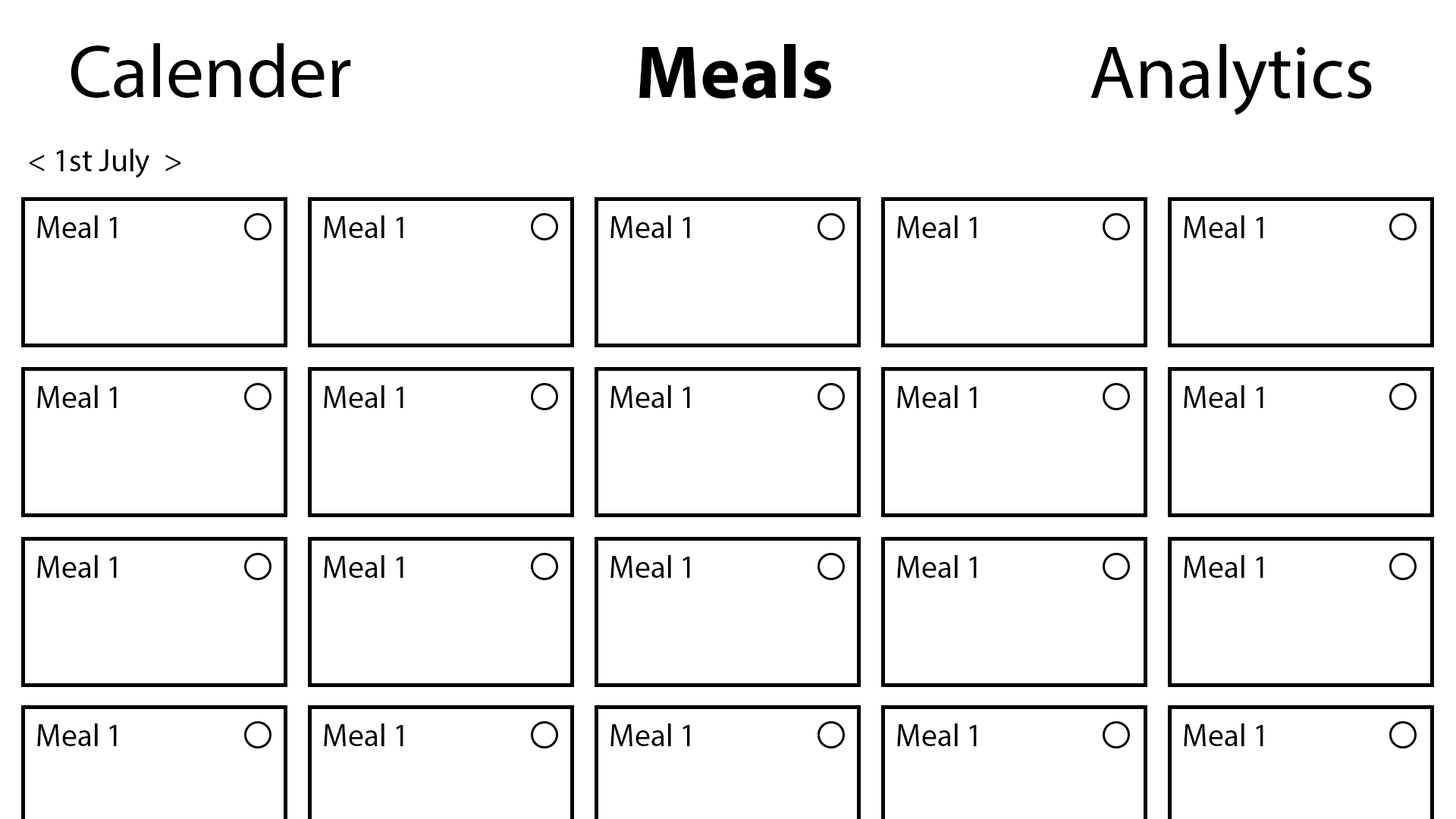
<style>
.page{position:relative;width:1456px;height:819px;background:#ffffff}
.page>*{position:absolute;margin:0}
.t1{font:75.8px "MyriadPro-Regular";color:#000000}
.t2{font:75.8px "MyriadPro-Bold";color:#000000}
.t3{font:31.6px "MyriadPro-Regular";color:#000000}
</style>
<div class="page">
<p class="t1" style="left:71px;top:43px;width:280px;height:55px">Calender</p>
<p class="t2" style="left:639px;top:44px;width:192px;height:55px">Meals</p>
<p class="t1" style="left:1090px;top:44px;width:282px;height:71px">Analytics</p>
<p class="t3" style="left:30px;top:149px;width:150px;height:29px">&lt; 1st July  &gt;</p>
<p class="t3" style="left:37px;top:215px;width:80px;height:23px">Meal 1</p>
<p class="t3" style="left:324px;top:215px;width:79px;height:23px">Meal 1</p>
<p class="t3" style="left:610px;top:215px;width:80px;height:23px">Meal 1</p>
<p class="t3" style="left:897px;top:215px;width:80px;height:23px">Meal 1</p>
<p class="t3" style="left:1184px;top:215px;width:79px;height:23px">Meal 1</p>
<p class="t3" style="left:37px;top:385px;width:80px;height:23px">Meal 1</p>
<p class="t3" style="left:324px;top:385px;width:79px;height:23px">Meal 1</p>
<p class="t3" style="left:610px;top:385px;width:80px;height:23px">Meal 1</p>
<p class="t3" style="left:897px;top:385px;width:80px;height:23px">Meal 1</p>
<p class="t3" style="left:1184px;top:385px;width:79px;height:23px">Meal 1</p>
<p class="t3" style="left:37px;top:555px;width:80px;height:23px">Meal 1</p>
<p class="t3" style="left:324px;top:555px;width:79px;height:23px">Meal 1</p>
<p class="t3" style="left:610px;top:555px;width:80px;height:23px">Meal 1</p>
<p class="t3" style="left:897px;top:555px;width:80px;height:23px">Meal 1</p>
<p class="t3" style="left:1184px;top:555px;width:79px;height:23px">Meal 1</p>
<p class="t3" style="left:37px;top:723px;width:80px;height:23px">Meal 1</p>
<p class="t3" style="left:324px;top:723px;width:79px;height:23px">Meal 1</p>
<p class="t3" style="left:610px;top:723px;width:80px;height:23px">Meal 1</p>
<p class="t3" style="left:897px;top:723px;width:80px;height:23px">Meal 1</p>
<p class="t3" style="left:1184px;top:723px;width:79px;height:23px">Meal 1</p>
</div>
